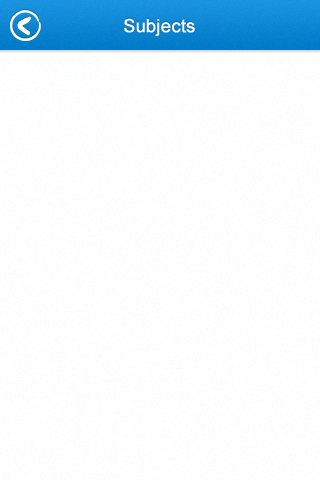
<style>
.page{position:relative;width:320px;height:480px}
.page>*{position:absolute;margin:0}
.t1{font:18px "ArialMT";letter-spacing:0.025em;color:#ffffff;font-weight:bold}
</style>
<div class="page">
<p class="t1" style="left:124px;top:18px;width:71px;height:18px">Subjects</p>
</div>
